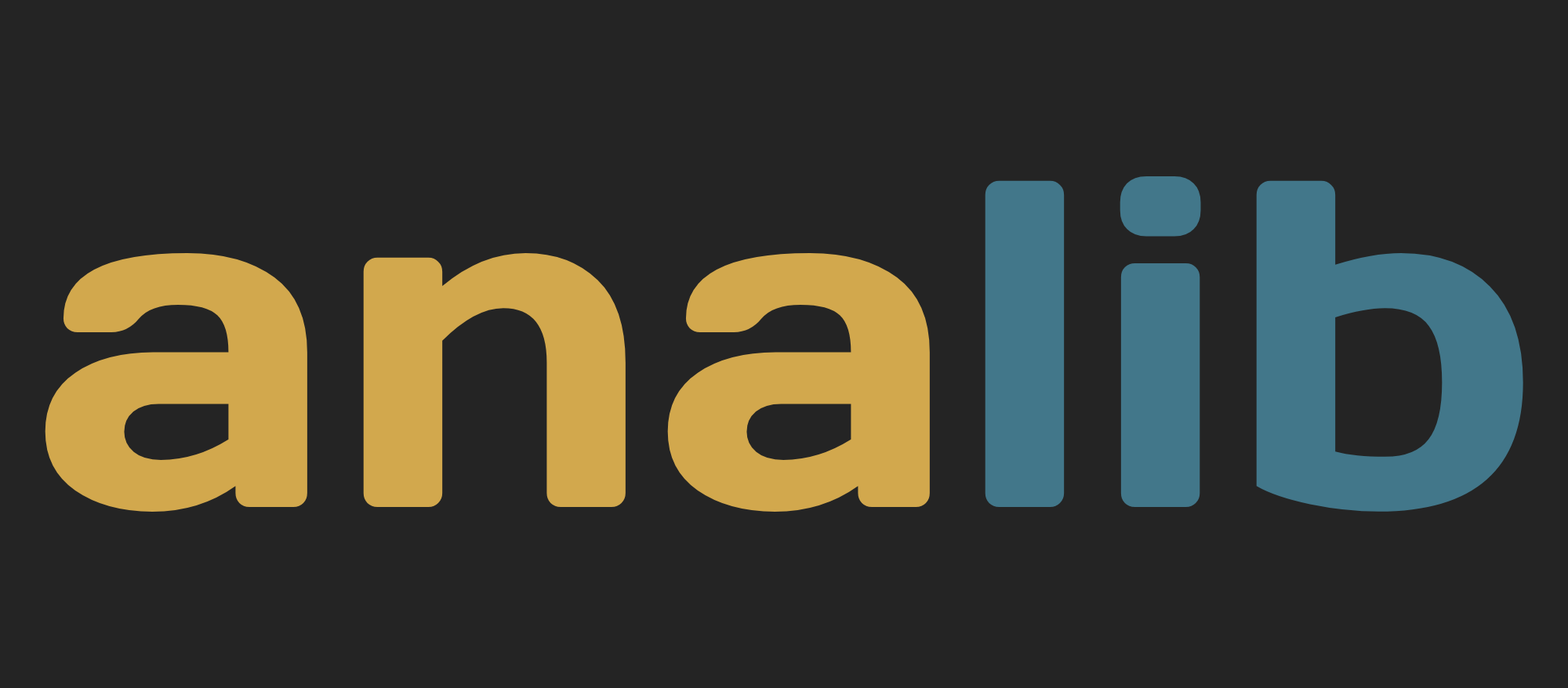
<style>
.page{position:relative;width:1568px;height:688px;background:#242424}
.page>*{position:absolute;margin:0}
.t1{font:466.1px "DaysOne-Regular";color:#d2a84d}
.t2{font:466.1px "DaysOne-Regular";color:#42778a}
</style>
<div class="page">
<p class="t1" style="left:45px;top:176px;width:1478px;height:336px">ana<span class="t2">lib</span></p>
</div>
